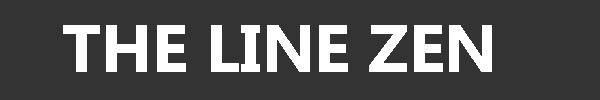
<style>
.page{position:relative;width:600px;height:100px;background:#333333}
.page>*{position:absolute;margin:0}
.t1{font:66.7px "Gadugi-Bold";color:#ffffff}
</style>
<div class="page">
<p class="t1" style="left:63px;top:25px;width:429px;height:47px">THE LINE ZEN</p>
</div>
